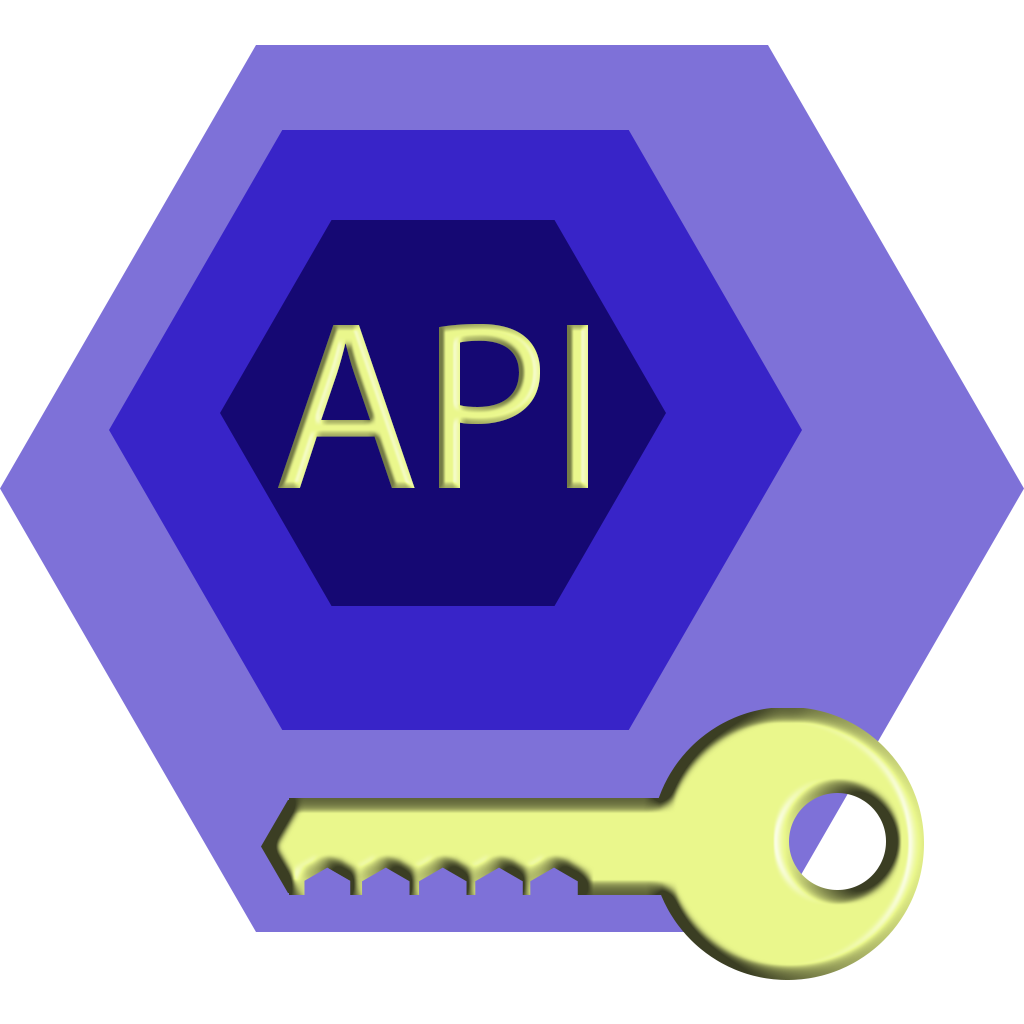
<style>
.page{position:relative;width:1024px;height:1024px;background:#ffffff}
.page>*{position:absolute;margin:0}
.t1{font:242px "MyriadPro-Regular"}
</style>
<div class="page">
<p class="t1" style="left:278px;top:324px;width:310px;height:164px">API</p>
</div>
